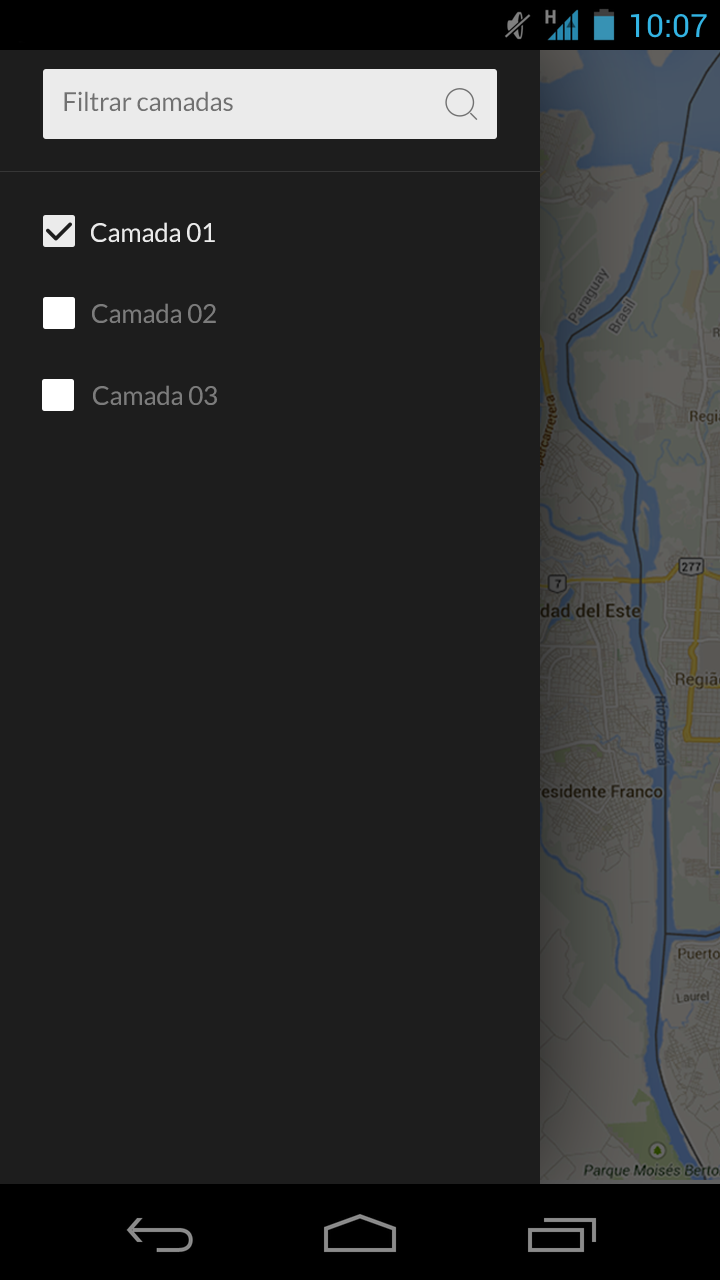
<style>
.page{position:relative;width:720px;height:1280px;background:#1d1d1d}
.page>*{position:absolute;margin:0}
.t1{font:26px "Lato-Regular";letter-spacing:-0.01em;color:#717171}
.t2{font:26px "Lato-Regular";letter-spacing:-0.01em;color:#ebebeb}
.t3{font:26px "Lato-Regular";letter-spacing:-0.01em;color:#7c7c7c}
</style>
<div class="page">
<p class="t1" style="left:64px;top:91px;width:169px;height:21px">Filtrar camadas</p>
<p class="t2" style="left:91px;top:222px;width:124px;height:21px">Camada 01</p>
<p class="t3" style="left:92px;top:303px;width:124px;height:21px">Camada 02</p>
<p class="t3" style="left:93px;top:385px;width:124px;height:21px">Camada 03</p>
</div>
